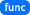
<style>
.page{position:relative;width:30px;height:15px;background:#0072ff}
.page>*{position:absolute;margin:0}
.t1{font:10px "LucidaSans";color:#ffffff}
</style>
<div class="page">
<p class="t1" style="left:4px;top:2px;width:22px;height:9px">func</p>
</div>
